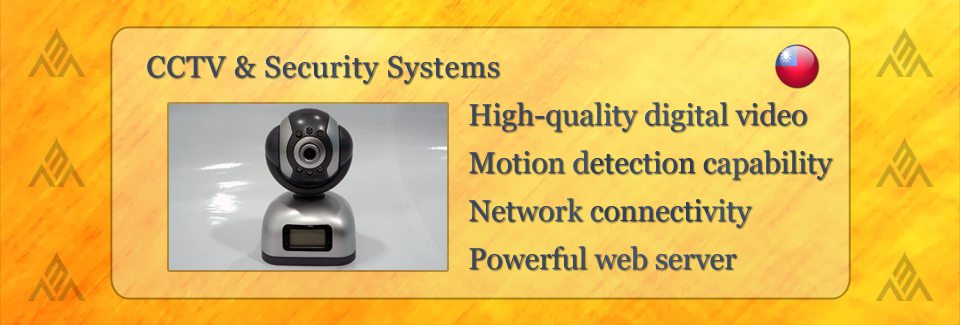
<style>
.page{position:relative;width:960px;height:325px}
.page>*{position:absolute;margin:0}
.t1{font:30px "Georgia";letter-spacing:0.025em;color:#364866}
.t2{font:30px/48px "Georgia";color:#364868}
</style>
<div class="page">
<p class="t1" style="left:147px;top:55px;width:352px;height:29px">CCTV &amp; Security Systems</p>
<p class="t2" style="left:469px;top:102px;width:364px;height:168px">High-quality digital video<br>Motion detection capability<br>Network connectivity<br>Powerful web server</p>
</div>
